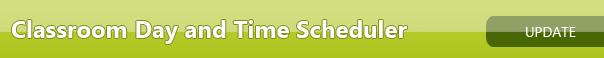
<style>
.page{position:relative;width:604px;height:58px}
.page>*{position:absolute;margin:0}
.t1{font:24px "SegoeUI-Bold";color:#fefefe}
.t2{font:14px "SegoeUI";color:#ffffff}
</style>
<div class="page">
<p class="t1" style="left:11px;top:20px;width:396px;height:24px">Classroom Day and Time Scheduler</p>
<p class="t2" style="left:526px;top:27px;width:50px;height:10px">UPDATE</p>
</div>
